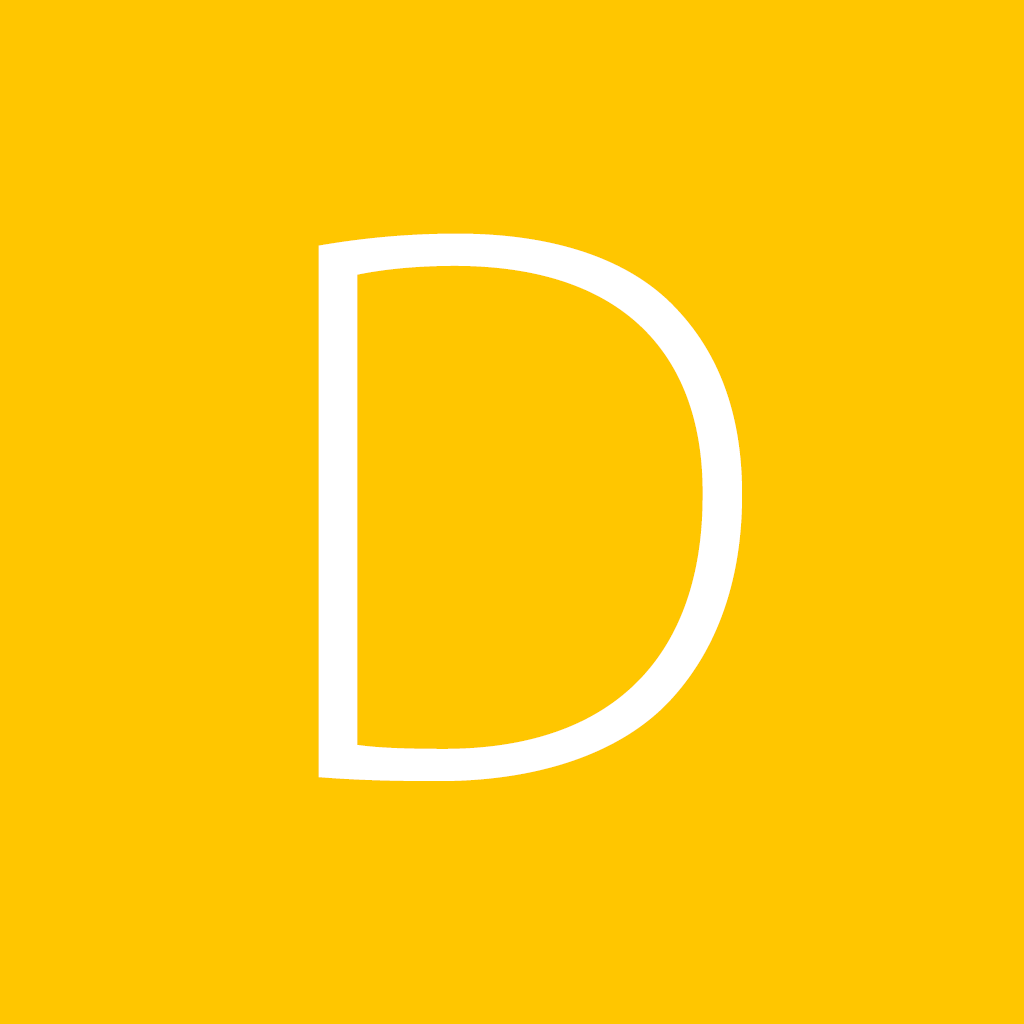
<style>
.page{position:relative;width:1024px;height:1024px;background:#ffc600}
.page>*{position:absolute;margin:0}
.t1{font:800px "MyriadPro-Light";color:#ffffff}
</style>
<div class="page">
<p class="t1" style="left:318px;top:233px;width:424px;height:548px">D</p>
</div>
